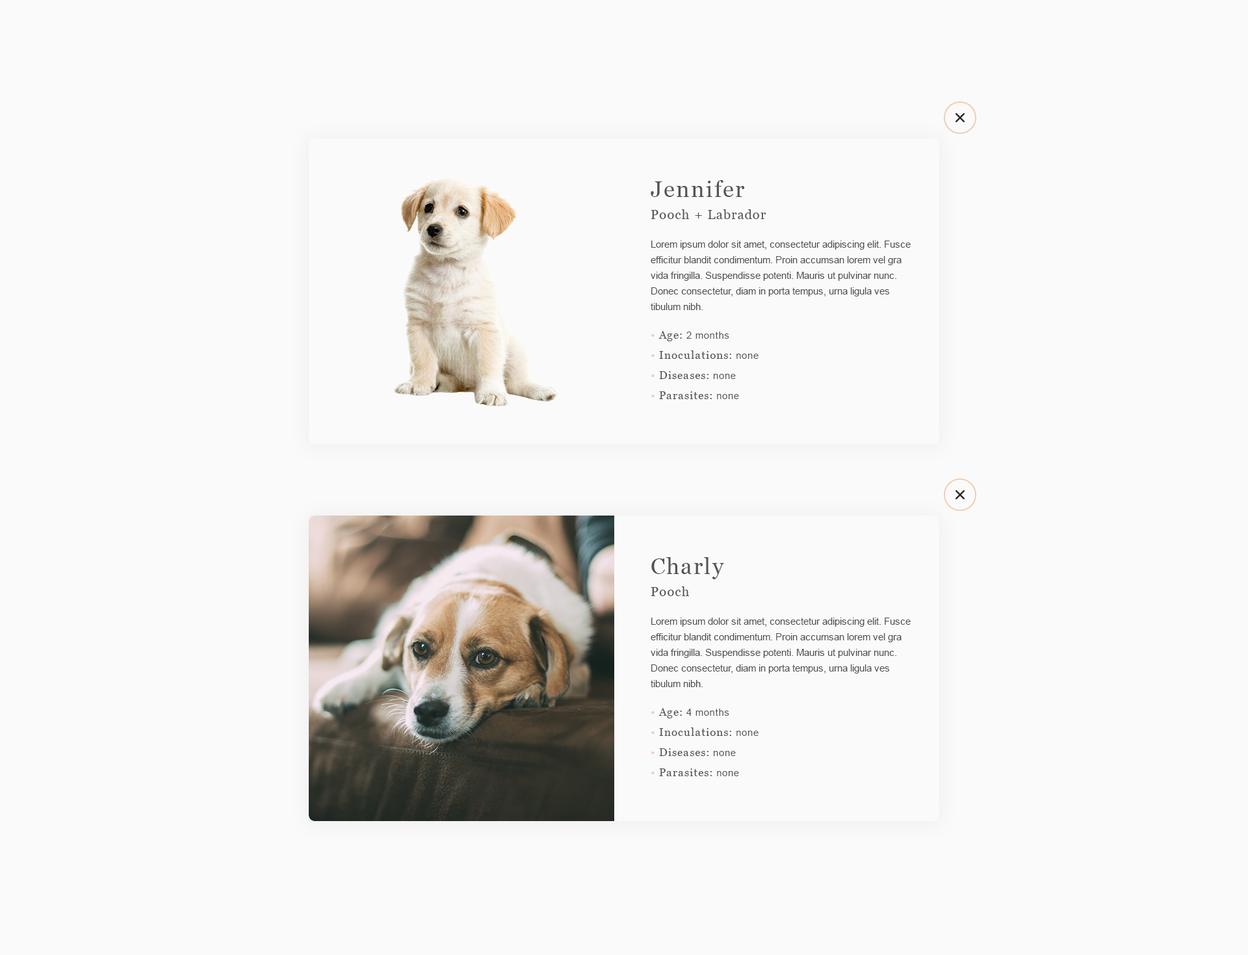
<style>
.page{position:relative;width:1248px;height:955px;background:#fafafa}
.page>*{position:absolute;margin:0}
.t1{font:13px/22.1px "Georgia";letter-spacing:0.06em;color:#545454}
.t2{font:22.8px/29.3px "Georgia";letter-spacing:0.06em;color:#545454}
.t3{font:9.8px/15.6px "ArialMT";color:#4c4c4c}
.t4{font:9.8px "ArialMT";letter-spacing:0.06em;color:#545454}
.t5{font:11.1px "Georgia";letter-spacing:0.06em;color:#f1cdb3}
.t6{font:11.1px "Georgia";letter-spacing:0.06em;color:#545454}
</style>
<div class="page">
<p class="t1" style="left:651px;top:180px;width:116px;height:39px;text-align:right"><span class="t2">Jennifer<br></span>Pooch + Labrador</p>
<p class="t3" style="left:651px;top:241px;width:260px;height:69px;text-align:right">Lorem ipsum dolor sit amet, consectetur adipiscing elit. Fusce efficitur blandit condimentum. Proin accumsan lorem vel gra vida fringilla. Suspendisse potenti. Mauris ut pulvinar nunc. Donec consectetur, diam in porta tempus, urna ligula ves tibulum nibh.</p>
<p class="t4" style="left:652px;top:331px;width:78px;height:10px"><span class="t5">•</span><span class="t6"> Age: </span>2 months</p>
<p class="t6" style="left:652px;top:350px;width:107px;height:9px"><span class="t5">•</span> Inoculations: <span class="t4">none</span></p>
<p class="t6" style="left:652px;top:371px;width:84px;height:8px"><span class="t5">•</span> Diseases: <span class="t4">none</span></p>
<p class="t6" style="left:652px;top:391px;width:87px;height:8px"><span class="t5">•</span> Parasites: <span class="t4">none</span></p>
<p class="t2" style="left:651px;top:557px;width:73px;height:39px;text-align:right">Charly<br><span class="t1">Pooch</span></p>
<p class="t3" style="left:651px;top:618px;width:260px;height:69px;text-align:right">Lorem ipsum dolor sit amet, consectetur adipiscing elit. Fusce efficitur blandit condimentum. Proin accumsan lorem vel gra vida fringilla. Suspendisse potenti. Mauris ut pulvinar nunc. Donec consectetur, diam in porta tempus, urna ligula ves tibulum nibh.</p>
<p class="t4" style="left:652px;top:708px;width:78px;height:10px"><span class="t5">•</span><span class="t6"> Age: </span>4 months</p>
<p class="t6" style="left:652px;top:728px;width:107px;height:8px"><span class="t5">•</span> Inoculations: <span class="t4">none</span></p>
<p class="t6" style="left:652px;top:748px;width:84px;height:8px"><span class="t5">•</span> Diseases: <span class="t4">none</span></p>
<p class="t6" style="left:652px;top:769px;width:87px;height:7px"><span class="t5">•</span> Parasites: <span class="t4">none</span></p>
</div>
